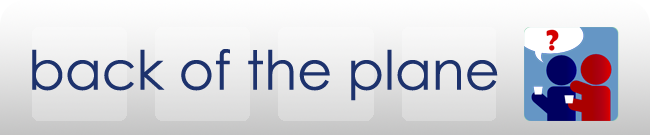
<style>
.page{position:relative;width:650px;height:135px}
.page>*{position:absolute;margin:0}
.t1{font:54px "CenturyGothic";color:#1d326d}
</style>
<div class="page">
<p class="t1" style="left:32px;top:49px;width:466px;height:52px">back of the plane</p>
</div>
